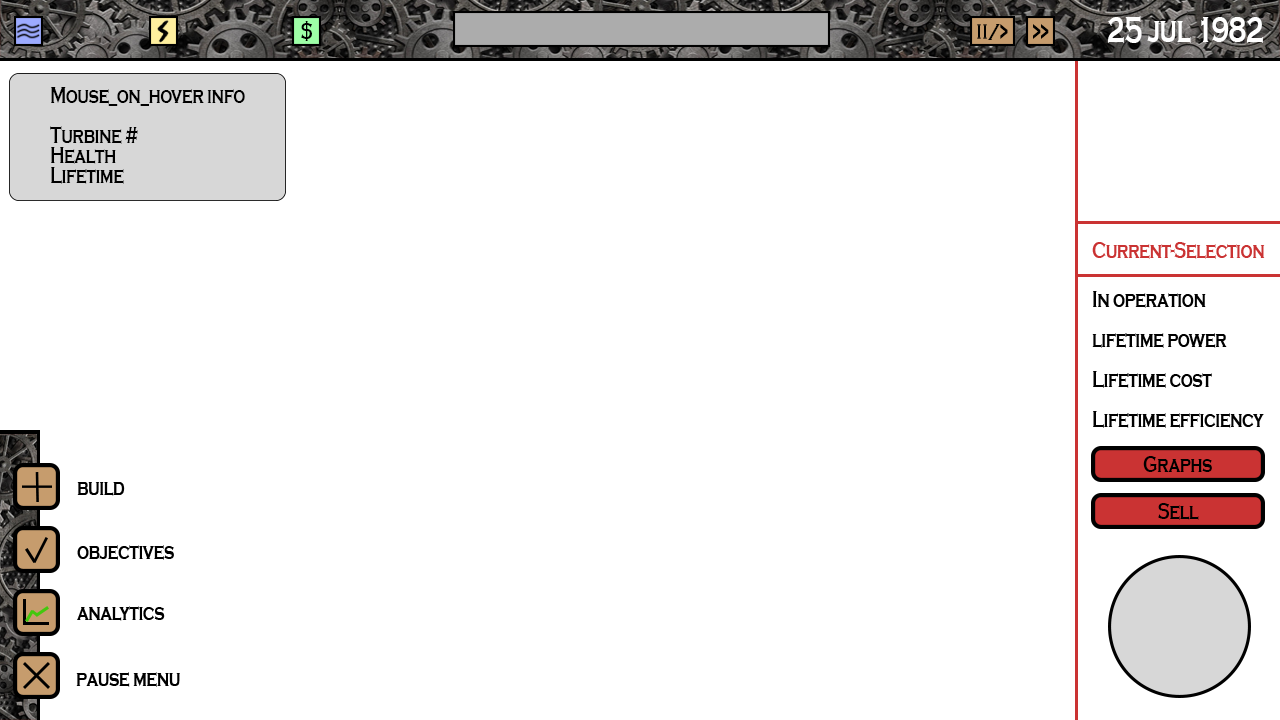
<style>
.page{position:relative;width:1280px;height:720px;background:#ffffff}
.page>*{position:absolute;margin:0}
.t1{font:37px "CopperplateGothic-Bold";letter-spacing:-0.02em;color:#ffffff;scale:0.68 1}
.t2{font:24.7px "CopperplateGothic-Bold";letter-spacing:-0.02em;color:#000000;scale:0.68 1}
.t3{font:24.7px "CopperplateGothic-Bold";letter-spacing:-0.02em;color:#ca3333;scale:0.68 1}
.t4{font:24.7px "CopperplateGothic-Bold";letter-spacing:-0.02em;color:#010101;scale:0.68 1}
</style>
<div class="page">
<p class="t1" style="left:1108px;top:16px;width:155px;height:27px">25 jul 1982</p>
<p class="t2" style="left:301px;top:21px;width:11px;height:20px">$</p>
<p class="t2" style="left:988px;top:24px;width:20px;height:16px">/&gt;</p>
<p class="t2" style="left:1033px;top:24px;width:16px;height:15px">&gt;&gt;</p>
<p class="t2" style="left:50px;top:87px;width:195px;height:97px">Mouse_on_hover info<br><br>Turbine #<br>Health<br>Lifetime</p>
<p class="t3" style="left:1092px;top:242px;width:173px;height:17px">Current-Selection</p>
<p class="t4" style="left:1092px;top:291px;width:172px;height:137px">In operation<br><br>lifetime power<br><br>Lifetime cost<br><br>Lifetime efficiency</p>
<p class="t2" style="left:1143px;top:456px;width:69px;height:16px">Graphs</p>
<p class="t2" style="left:77px;top:482px;width:48px;height:14px">build</p>
<p class="t2" style="left:1158px;top:503px;width:41px;height:17px">Sell</p>
<p class="t2" style="left:77px;top:545px;width:97px;height:15px">objectives</p>
<p class="t2" style="left:77px;top:606px;width:88px;height:15px">analytics</p>
<p class="t2" style="left:76px;top:672px;width:104px;height:15px">pause menu</p>
</div>
